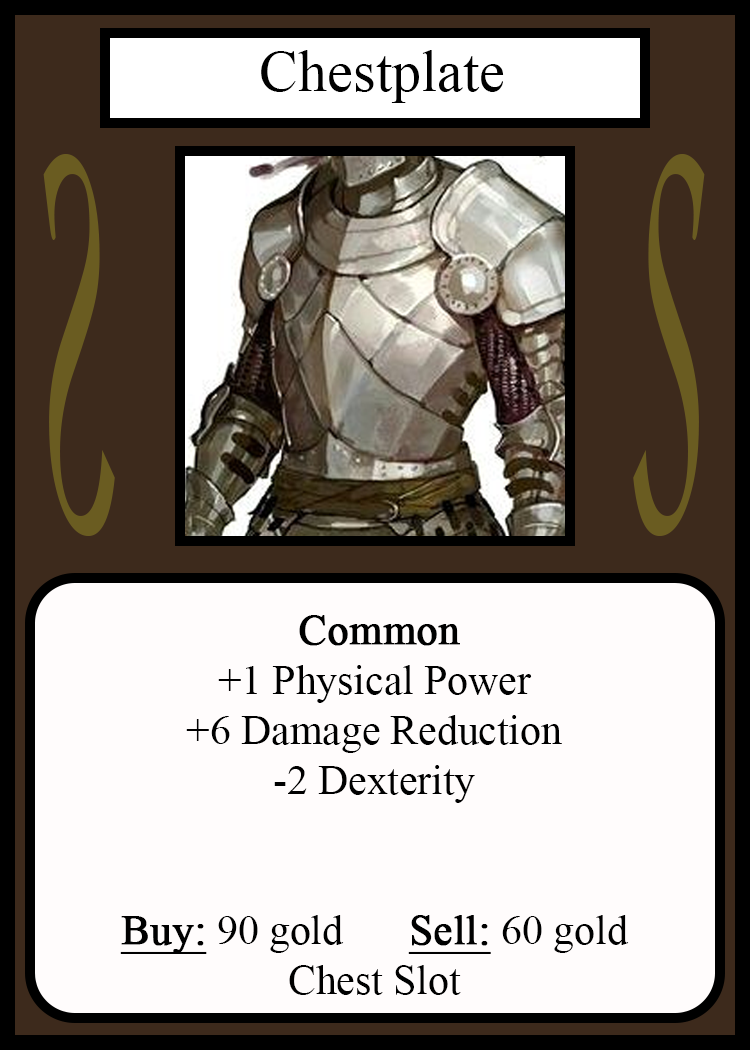
<style>
.page{position:relative;width:750px;height:1050px;background:#fffcfc}
.page>*{position:absolute;margin:0}
.t1{font:58.3px "TimesNewRomanPSMT";color:#010101}
.t2{font:548.5px "Apple-Chancery";color:#6a5c21;scale:0.27 1}
.t3{font:548.2px "Apple-Chancery";color:#6a5c21;scale:0.27 1}
.t4{font:41.7px "TimesNewRomanPSMT";color:#000000}
.t5{font:41.7px "TimesNewRomanPSMT";color:#000000;font-weight:bold}
.t6{font:41.7px "TimesNewRomanPSMT";color:#000000;font-weight:bold;text-decoration:underline}
</style>
<div class="page">
<p class="t1" style="left:261px;top:50px;width:243px;height:53px">Chestplate</p>
<p class="t2" style="left:43px;top:154px;width:72px;height:382px;rotate:180deg">S</p>
<p class="t3" style="left:633px;top:154px;width:72px;height:382px">S</p>
<p class="t4" style="left:120px;top:615px;width:509px;height:380px;text-align:center"><span class="t5">Common</span><br>+1 Physical Power<br>+6 Damage Reduction<br>-2 Dexterity<br><br><br><span class="t6">Buy:</span> 90 gold   <span class="t6">Sell:</span> 60 gold<br>Chest Slot</p>
</div>
